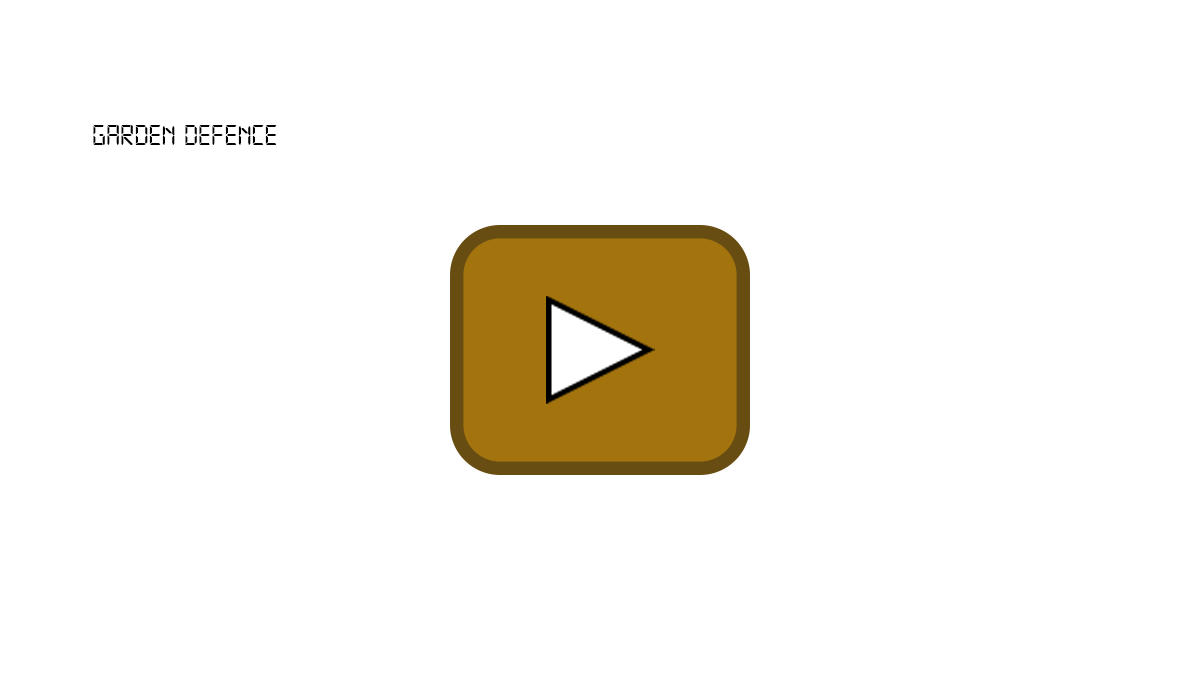
<style>
.page{position:relative;width:1200px;height:700px;background:#ffffff}
.page>*{position:absolute;margin:0}
.t1{font:30px "Digital-7";color:#000000}
</style>
<div class="page">
<p class="t1" style="left:93px;top:125px;width:184px;height:20px">GARDEN DEFENCE</p>
</div>
